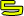
<style>
.page{position:relative;width:24px;height:16px;background:#eaff00}
.page>*{position:absolute;margin:0}
.t1{font:25px "ThundergodII";color:#eaff00}
</style>
<div class="page">
<p class="t1" style="left:1px;top:1px;width:22px;height:14px">5</p>
</div>
